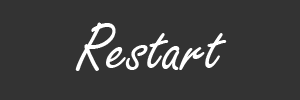
<style>
.page{position:relative;width:300px;height:100px;background:#333333}
.page>*{position:absolute;margin:0}
.t1{font:72px "FreestyleScript-Regular";color:#ffffff}
</style>
<div class="page">
<p class="t1" style="left:75px;top:22px;width:152px;height:49px">Restart</p>
</div>
